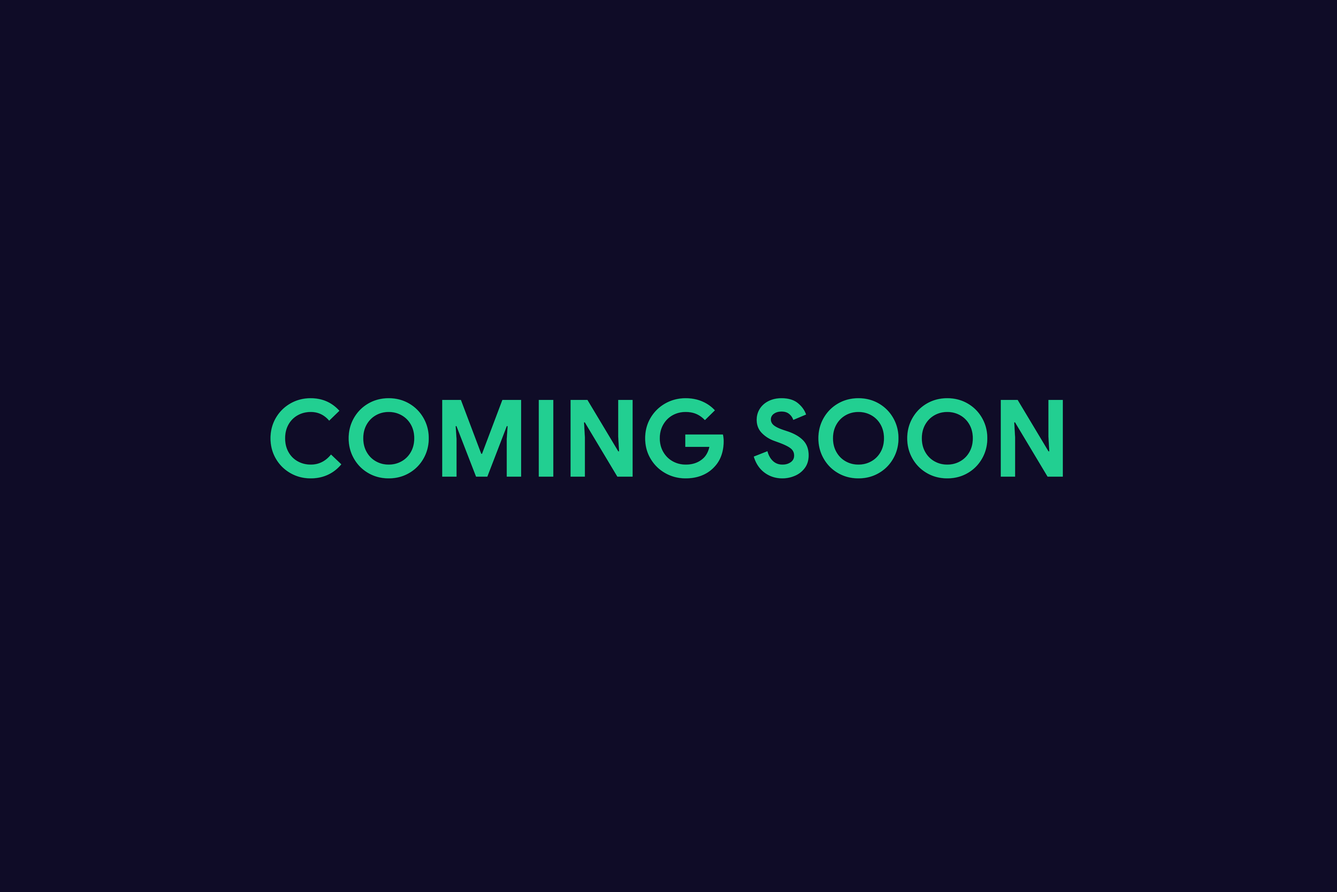
<style>
.page{position:relative;width:1337px;height:892px;background:#0f0c27}
.page>*{position:absolute;margin:0}
.t1{font:107px "GoogleSans-Bold";color:#22cf91}
</style>
<div class="page">
<p class="t1" style="left:270px;top:398px;width:793px;height:80px">COMING SOON</p>
</div>
